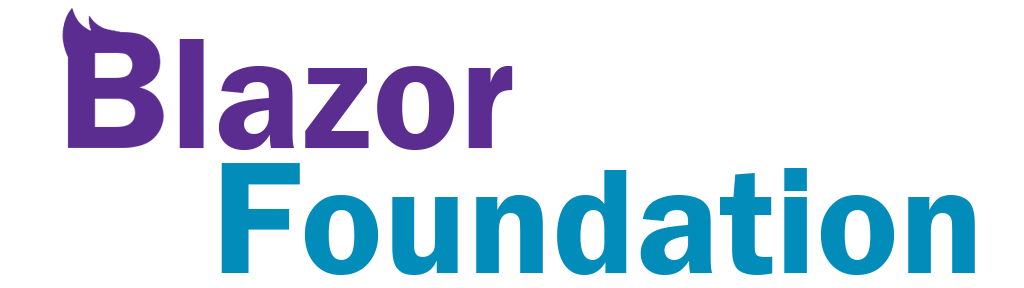
<style>
.page{position:relative;width:1024px;height:288px;background:#ffffff}
.page>*{position:absolute;margin:0}
.t1{font:162.9px "FranklinGothic-Demi";color:#5c2d91}
.t2{font:155.2px "FranklinGothic-Demi";color:#028cb9}
</style>
<div class="page">
<p class="t1" style="left:179px;top:39px;width:334px;height:111px">lazor</p>
<p class="t2" style="left:304px;top:168px;width:671px;height:107px">oundation</p>
</div>
